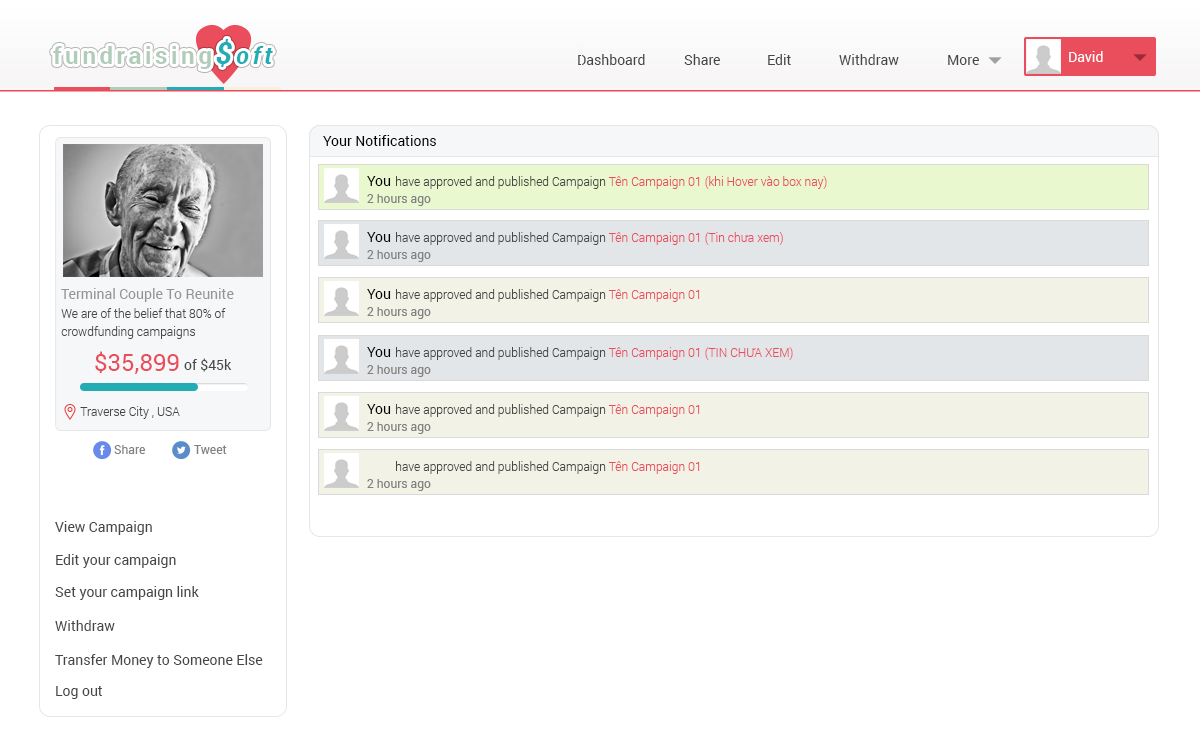
<style>
.page{position:relative;width:1200px;height:744px;background:#ffffff}
.page>*{position:absolute;margin:0}
.t1{font:24px "Roboto-Bold";letter-spacing:0.15em;color:#b2ccba}
.t2{font:30px "Roboto-BoldItalic";letter-spacing:0.15em;color:#23acb4}
.t3{font:24px "Roboto-BoldItalic";letter-spacing:0.15em;color:#23acb4}
.t4{font:14px "Roboto-Regular";color:#464646}
.t5{font:14px "Roboto-Regular";color:#ffffff}
.t6{font:14px "Roboto-Regular";color:#000000}
.t7{font:12px "Roboto-Light";color:#ea4d5b}
.t8{font:12px "Roboto-Light";color:#464646}
.t9{font:12px "Roboto-Regular";color:#818181}
</style>
<div class="page">
<p class="t1" style="left:53px;top:39px;width:220px;height:30px">fundraising<span class="t2">$</span><span class="t3">oft</span></p>
<p class="t4" style="left:578px;top:54px;width:67px;height:11px">Dashboard</p>
<p class="t4" style="left:684px;top:54px;width:36px;height:11px">Share</p>
<p class="t4" style="left:768px;top:54px;width:23px;height:11px">Edit</p>
<p class="t4" style="left:839px;top:54px;width:60px;height:11px">Withdraw</p>
<p class="t5" style="left:1069px;top:51px;width:34px;height:11px">David</p>
<p class="t4" style="left:948px;top:55px;width:31px;height:10px">More</p>
<p class="t6" style="left:323px;top:135px;width:113px;height:11px">Your Notifications</p>
<p class="t6" style="left:367px;top:176px;width:24px;height:10px">You</p>
<p class="t7" style="left:396px;top:176px;width:431px;height:13px"><span class="t8">have approved and published Campaign </span>Tên Campaign 01 (khi Hover vào box nay)</p>
<p class="t9" style="left:367px;top:194px;width:64px;height:12px">2 hours ago</p>
<p class="t6" style="left:367px;top:232px;width:24px;height:10px">You</p>
<p class="t8" style="left:396px;top:232px;width:387px;height:13px">have approved and published Campaign <span class="t7">Tên Campaign 01 (Tin chưa xem)</span></p>
<p class="t9" style="left:367px;top:250px;width:64px;height:12px">2 hours ago</p>
<p class="t6" style="left:367px;top:289px;width:24px;height:10px">You</p>
<p class="t8" style="left:396px;top:289px;width:304px;height:13px">have approved and published Campaign <span class="t7">Tên Campaign 01</span></p>
<p class="t9" style="left:367px;top:307px;width:64px;height:12px">2 hours ago</p>
<p class="t6" style="left:367px;top:347px;width:24px;height:10px">You</p>
<p class="t8" style="left:396px;top:347px;width:397px;height:13px">have approved and published Campaign <span class="t7">Tên Campaign 01 (TIN CHƯA XEM)</span></p>
<p class="t9" style="left:367px;top:365px;width:64px;height:12px">2 hours ago</p>
<p class="t6" style="left:367px;top:404px;width:24px;height:10px">You</p>
<p class="t8" style="left:396px;top:404px;width:304px;height:13px">have approved and published Campaign <span class="t7">Tên Campaign 01</span></p>
<p class="t9" style="left:367px;top:422px;width:64px;height:12px">2 hours ago</p>
<p class="t8" style="left:396px;top:461px;width:304px;height:13px">have approved and published Campaign <span class="t7">Tên Campaign 01</span></p>
<p class="t9" style="left:367px;top:479px;width:64px;height:12px">2 hours ago</p>
</div>
